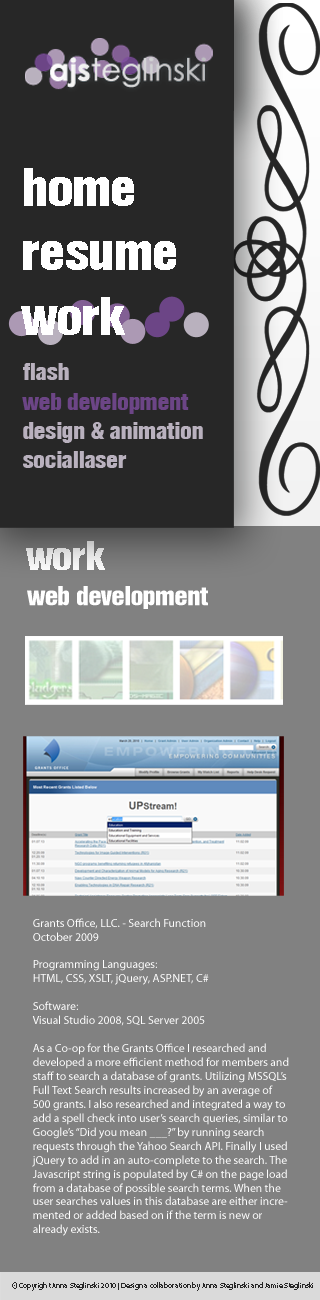
<style>
.page{position:relative;width:320px;height:1300px;background:#818181}
.page>*{position:absolute;margin:0}
.t1{font:53.5px "HelbaConDBNormal";color:#ffffff}
.t2{font:24.5px "HelbaConDBNormal";color:#b9b1be}
.t3{font:24.5px "HelbaConDBNormal";color:#6c4586}
.t4{font:40.1px "HelbaConDBNormal";color:#eaeaea}
.t5{font:26.7px "HelbaConDBNormal";color:#ffffff}
.t6{font:11.6px "MyriadPro-Regular";color:#ffffff}
.t7{font:7.4px "MyriadPro-Regular";color:#272727}
</style>
<div class="page">
<p class="t1" style="left:21px;top:168px;width:155px;height:167px">home<br>resume<br>work</p>
<p class="t2" style="left:22px;top:363px;width:181px;height:105px">flash<br><span class="t3">web development<br></span>design &amp; animation<br>sociallaser</p>
<p class="t4" style="left:26px;top:541px;width:79px;height:29px">work</p>
<p class="t5" style="left:27px;top:586px;width:181px;height:23px">web development</p>
<p class="t6" style="left:32px;top:918px;width:257px;height:318px">Grants Office, LLC. - Search Function<br>October 2009<br><br>Programming Languages: <br>HTML, CSS, XSLT, jQuery, ASP.NET, C#<br><br>Software: <br>Visual Studio 2008, SQL Server 2005<br><br>As a Co-op for the Grants Office I researched and developed a more efficient method for members and staff to search a database of grants. Utilizing MSSQL’s Full Text Search results increased by an average of 500 grants. I also researched and integrated a way to add a spell check into user’s search queries, similar to Google’s “Did you mean ___?” by running search requests through the Yahoo Search API. Finally I used jQuery to add in an auto-complete to the search. The Javascript string is populated by C# on the page load from a database of possible search terms. When the user searches values in this database are either incremented or added based on if the term is new or already exists.</p>
<p class="t7" style="left:12px;top:1282px;width:301px;height:9px">© Copyright Anna Steglinski 2010 | Design a collaboration by Anna Steglinski and Jamie Steglinski</p>
</div>
